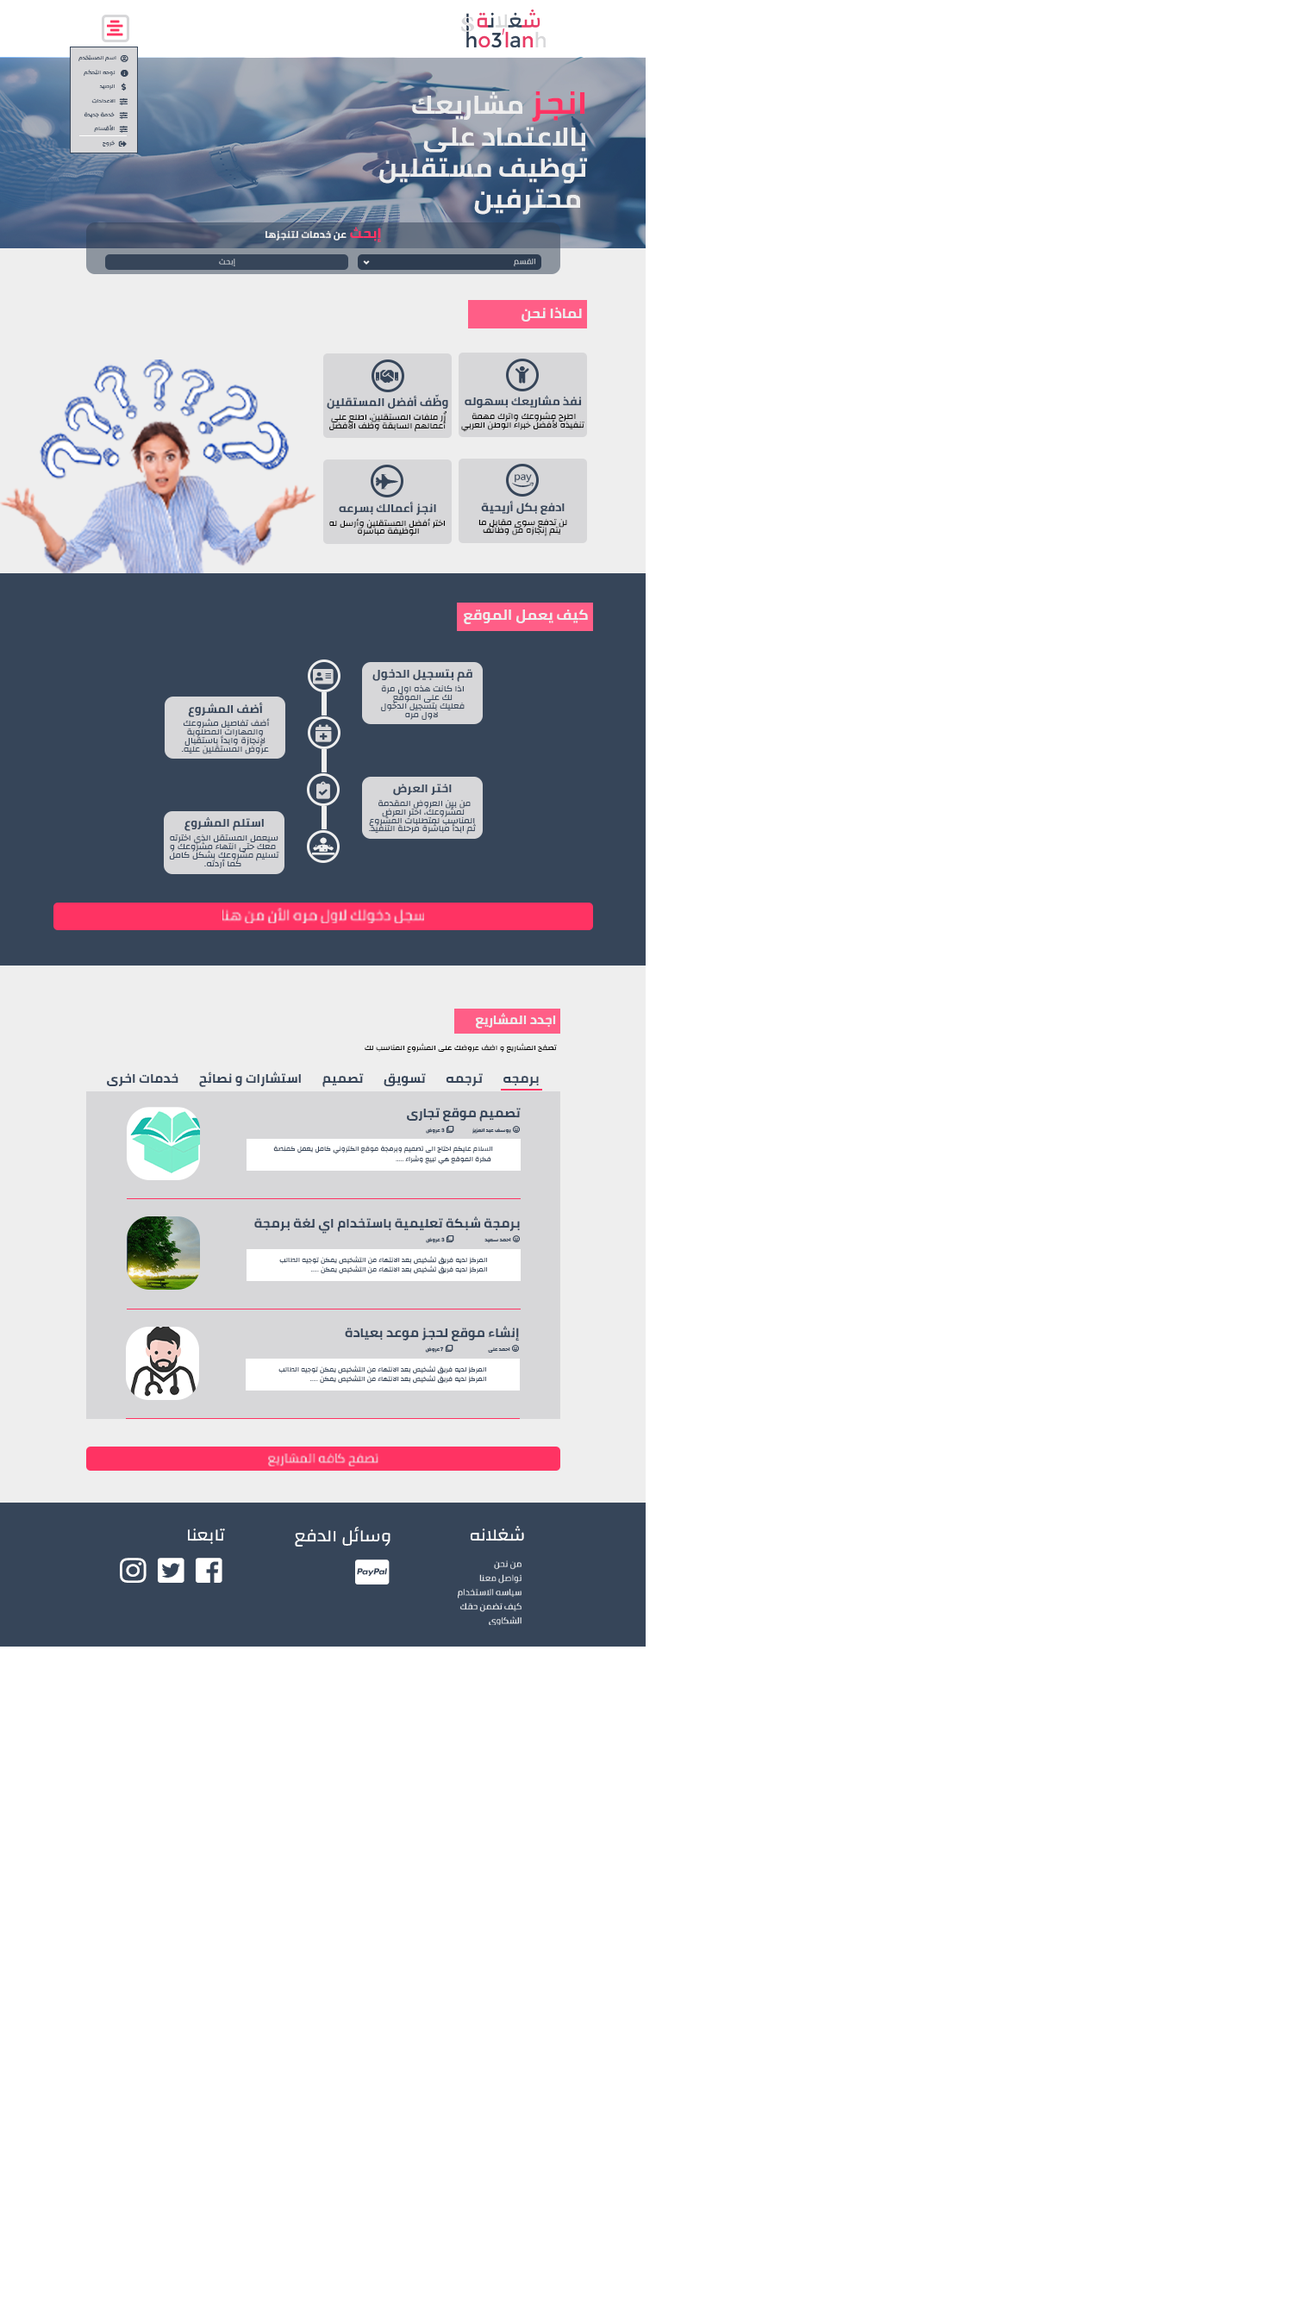
<style>
.page{position:relative;width:1293px;height:2300px;background:#ffffff}
.page>*{position:absolute;margin:0}
.t1{font:5.7px "Changa-Regular";color:#364559;scale:1.06 1}
.t2{font:25.9px/31.3px "Cairo-Bold";color:#eeeeee;text-transform:uppercase;scale:1.06 1}
.t3{font:31px/31.3px "Cairo-Bold";color:#ff3363;text-transform:uppercase;scale:1.06 1}
.t4{font:9.5px "Cairo-Bold";color:#eeeeee;text-transform:uppercase;scale:1.06 1}
.t5{font:13.8px "Cairo-Bold";color:#ff3363;text-transform:uppercase;scale:1.06 1}
.t6{font:7.9px "Cairo-Regular";text-transform:uppercase;scale:1.06 1}
.t7{font:14.1px "Cairo-Bold";color:#eeeeee;text-transform:uppercase;scale:1.06 1}
.t8{font:11.3px "Cairo-Bold";color:#364559;text-transform:uppercase;scale:1.06 1}
.t9{font:8.4px/8.4px "Changa-Regular";color:#000000;text-transform:uppercase;scale:1.06 1}
.t10{font:14.2px "Cairo-Bold";color:#eeeeee;text-transform:uppercase;scale:1.06 1}
.t11{font:11.4px "Cairo-Bold";color:#364559;text-transform:uppercase;scale:1.06 1}
.t12{font:8.5px/8.5px "Changa-Regular";color:#364559;text-transform:uppercase;scale:1.06 1}
.t13{font:14.2px "Cairo-Regular";color:#eeeeee;text-transform:uppercase;scale:1.06 1}
.t14{font:12.5px "Cairo-Bold";color:#eeeeee;text-transform:uppercase;scale:1.06 1}
.t15{font:7.5px "Changa-Regular";color:#000000;text-transform:uppercase;scale:1.06 1}
.t16{font:12.5px "Cairo-Bold";color:#364559;text-transform:uppercase;scale:1.06 1}
.t17{font:6.7px/10px "Changa-Regular";color:#364559;text-transform:uppercase;scale:1.06 1}
.t18{font:12.5px "Cairo-Regular";text-transform:uppercase;scale:1.06 1}
.t19{font:17px "Changa-Regular";color:#ffffff;text-transform:uppercase;scale:1.06 1}
.t20{font:8.5px/14.2px "Cairo-Regular";color:#ffffff;text-transform:uppercase;scale:1.06 1}
</style>
<div class="page">
<p class="t1" style="left:78px;top:55px;width:38px;height:6px">اسم المستخدم</p>
<p class="t1" style="left:84px;top:70px;width:32px;height:6px">لوحه التحكم</p>
<p class="t1" style="left:99px;top:84px;width:16px;height:6px">الرصيد</p>
<p class="t1" style="left:91px;top:98px;width:25px;height:5px">الاعدادات</p>
<p class="t2" style="left:379px;top:91px;width:208px;height:124px"><span class="t3">انجز </span>مشاريعك <br>بالاعتماد على<br>توظيف مستقلين<br> محترفين</p>
<p class="t1" style="left:84px;top:112px;width:31px;height:6px">خدمة جديدة</p>
<p class="t1" style="left:94px;top:124px;width:21px;height:8px">الأقسام</p>
<p class="t1" style="left:103px;top:141px;width:13px;height:6px">خروج</p>
<p class="t4" style="left:265px;top:227px;width:116px;height:15px"><span class="t5">إبحث </span>عن خدمات لتنجزها</p>
<p class="t6" style="left:219px;top:259px;width:16px;height:7px">إبحث</p>
<p class="t6" style="left:514px;top:259px;width:21px;height:7px">القسم</p>
<p class="t7" style="left:521px;top:307px;width:61px;height:15px">لماذا نحن</p>
<p class="t8" style="left:327px;top:394px;width:121px;height:15px">وظّف أفضل المستقلين</p>
<p class="t8" style="left:465px;top:395px;width:117px;height:13px">نفذ مشاريعك بسهوله</p>
<p class="t9" style="left:329px;top:411px;width:118px;height:21px;text-align:center">زُر ملفات المستقلين، اطلع على<br> أعمالهم السابقة وظف الأفضل</p>
<p class="t9" style="left:461px;top:411px;width:123px;height:21px;text-align:center">اطرح مشروعك واترك مهمة<br> تنفيذه لأفضل خبراء الوطن العربي</p>
<p class="t8" style="left:339px;top:502px;width:97px;height:13px">انجز أعمالك بسرعه</p>
<p class="t8" style="left:481px;top:501px;width:84px;height:14px">ادفع بكل أريحية</p>
<p class="t9" style="left:329px;top:518px;width:116px;height:18px;text-align:center">اختر أفضل المستقلين وأرسل له <br>الوظيفة مباشرة</p>
<p class="t9" style="left:478px;top:519px;width:89px;height:17px;text-align:center">لن تدفع سوى مقابل ما <br>يتم إنجازه من وظائف</p>
<p class="t10" style="left:464px;top:609px;width:124px;height:15px">كيف يعمل الموقع</p>
<p class="t11" style="left:372px;top:669px;width:100px;height:13px">قم بتسجيل الدخول</p>
<p class="t12" style="left:381px;top:685px;width:84px;height:35px;text-align:center">اذا كانت هذه اول مرة<br>لك على الموقع<br>فعليك بتسجيل الدخول<br> لاول مره</p>
<p class="t11" style="left:188px;top:702px;width:75px;height:15px">أضف المشروع</p>
<p class="t12" style="left:181px;top:718px;width:89px;height:36px;text-align:center">أضف تفاصيل مشروعك<br> والمهارات المطلوبة<br> لإنجازة وابدأ باستقبال<br> عروض المستقلين عليه.</p>
<p class="t11" style="left:393px;top:784px;width:59px;height:12px">اختر العرض</p>
<p class="t12" style="left:369px;top:800px;width:107px;height:34px;text-align:center">من بين العروض المقدمة <br>لمشروعك، اختر العرض<br> المناسب لمتطلبات المشروع<br> ثم ابدأ مباشرة مرحلة التنفيذ.</p>
<p class="t11" style="left:184px;top:816px;width:80px;height:15px">استلم المشروع</p>
<p class="t12" style="left:169px;top:834px;width:110px;height:34px;text-align:center">سيعمل المستقل الذي اخترته<br> معك حتى انتهاء مشروعك و<br>تسليم مشروعك بشكل كامل<br> كما أردته.</p>
<p class="t13" style="left:222px;top:908px;width:202px;height:15px">سجل دخولك لاول مره الأن من هنا</p>
<p class="t14" style="left:476px;top:1013px;width:80px;height:15px">اجدد المشاريع</p>
<p class="t15" style="left:365px;top:1043px;width:192px;height:9px">تصفح المشاريع و اضف عروضك على المشروع المناسب لك</p>
<p class="t16" style="left:107px;top:1071px;width:432px;height:16px">برمجه       ترجمه       تسويق       تصميم       استشارات و نصائح       خدمات اخرى</p>
<p class="t16" style="left:407px;top:1108px;width:114px;height:13px">تصميم موقع تجارى</p>
<p class="t17" style="left:273px;top:1146px;width:220px;height:19px">السلام عليكم احتاج الى تصميم وبرمجة موقع الكتروني كامل يعمل كمنصة<br> فكرة الموقع هي لبيع وشراء .....</p>
<p class="t16" style="left:254px;top:1216px;width:266px;height:17px">برمجة شبكة تعليمية باستخدام اي لغة برمجة</p>
<p class="t17" style="left:279px;top:1256px;width:208px;height:18px">المركز لديه فريق تشخيص بعد الانتهاء من التشخيص يمكن توجيه الطالب<br>المركز لديه فريق تشخيص بعد الانتهاء من التشخيص يمكن .....</p>
<p class="t16" style="left:345px;top:1326px;width:174px;height:15px">إنشاء موقع لحجز موعد بعيادة</p>
<p class="t17" style="left:278px;top:1365px;width:208px;height:18px">المركز لديه فريق تشخيص بعد الانتهاء من التشخيص يمكن توجيه الطالب<br>المركز لديه فريق تشخيص بعد الانتهاء من التشخيص يمكن .....</p>
<p class="t18" style="left:268px;top:1453px;width:110px;height:13px">تصفح كافه المشاريع</p>
<p class="t19" style="left:188px;top:1528px;width:37px;height:16px">تابعنا</p>
<p class="t19" style="left:295px;top:1527px;width:95px;height:19px">وسائل الدفع</p>
<p class="t19" style="left:470px;top:1526px;width:54px;height:15px">شغلانه</p>
<p class="t20" style="left:458px;top:1560px;width:63px;height:65px">من نحن<br>تواصل معنا<br>سياسه الاستخدام <br>كيف تضمن حقك<br>الشكاوى</p>
</div>
